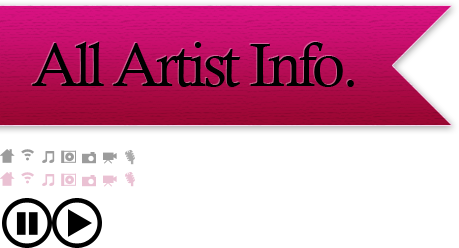
<style>
.page{position:relative;width:459px;height:248px;background:#ffffff}
.page>*{position:absolute;margin:0}
.t1{font:61px "CalistoMT";letter-spacing:-0.06em;color:#000000}
</style>
<div class="page">
<p class="t1" style="left:32px;top:42px;width:322px;height:45px">All Artist Info.</p>
</div>
